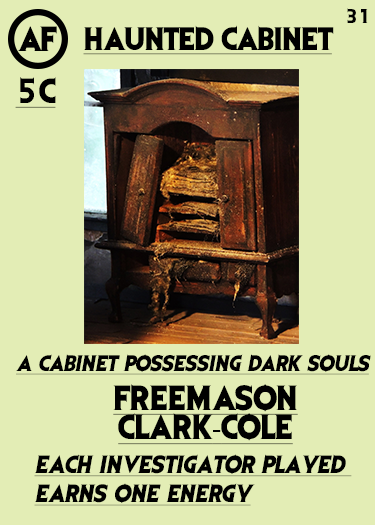
<style>
.page{position:relative;width:375px;height:525px;background:#e3edb5}
.page>*{position:absolute;margin:0}
.t1{font:16.7px "EvilDead";letter-spacing:-0.05em;color:#000000}
.t2{font:29.2px "EvilDead";letter-spacing:-0.05em;color:#000000}
.t3{font:27.1px "EvilDead";letter-spacing:-0.025em;color:#000000;text-decoration:underline}
.t4{font:29.2px "EvilDead";color:#000000;text-decoration:underline}
.t5{font:18.8px "EvilDead";color:#000000;font-style:italic;text-decoration:underline}
.t6{font:29.2px/29.2px "EvilDead";color:#000000;text-decoration:underline}
.t7{font:29.2px/29.2px "MyriadPro-Regular";color:#000000;text-decoration:underline}
.t8{font:20.8px/29.2px "EvilDead";color:#000000;font-style:italic;text-decoration:underline}
</style>
<div class="page">
<p class="t1" style="left:347px;top:8px;width:21px;height:15px">31</p>
<p class="t2" style="left:17px;top:26px;width:40px;height:25px">AF</p>
<p class="t3" style="left:83px;top:25px;width:251px;height:30px">HAUNTED CABINET</p>
<p class="t4" style="left:15px;top:77px;width:41px;height:31px">5C</p>
<p class="t5" style="left:16px;top:354px;width:355px;height:21px">A cabinet posSessing dark souls</p>
<p class="t6" style="left:113px;top:384px;width:185px;height:61px;text-align:center">FREEMASON<br>CLARK<span class="t7">-</span>COLE</p>
<p class="t8" style="left:34px;top:454px;width:318px;height:52px">Each investigator played <br>earns one energy</p>
</div>
